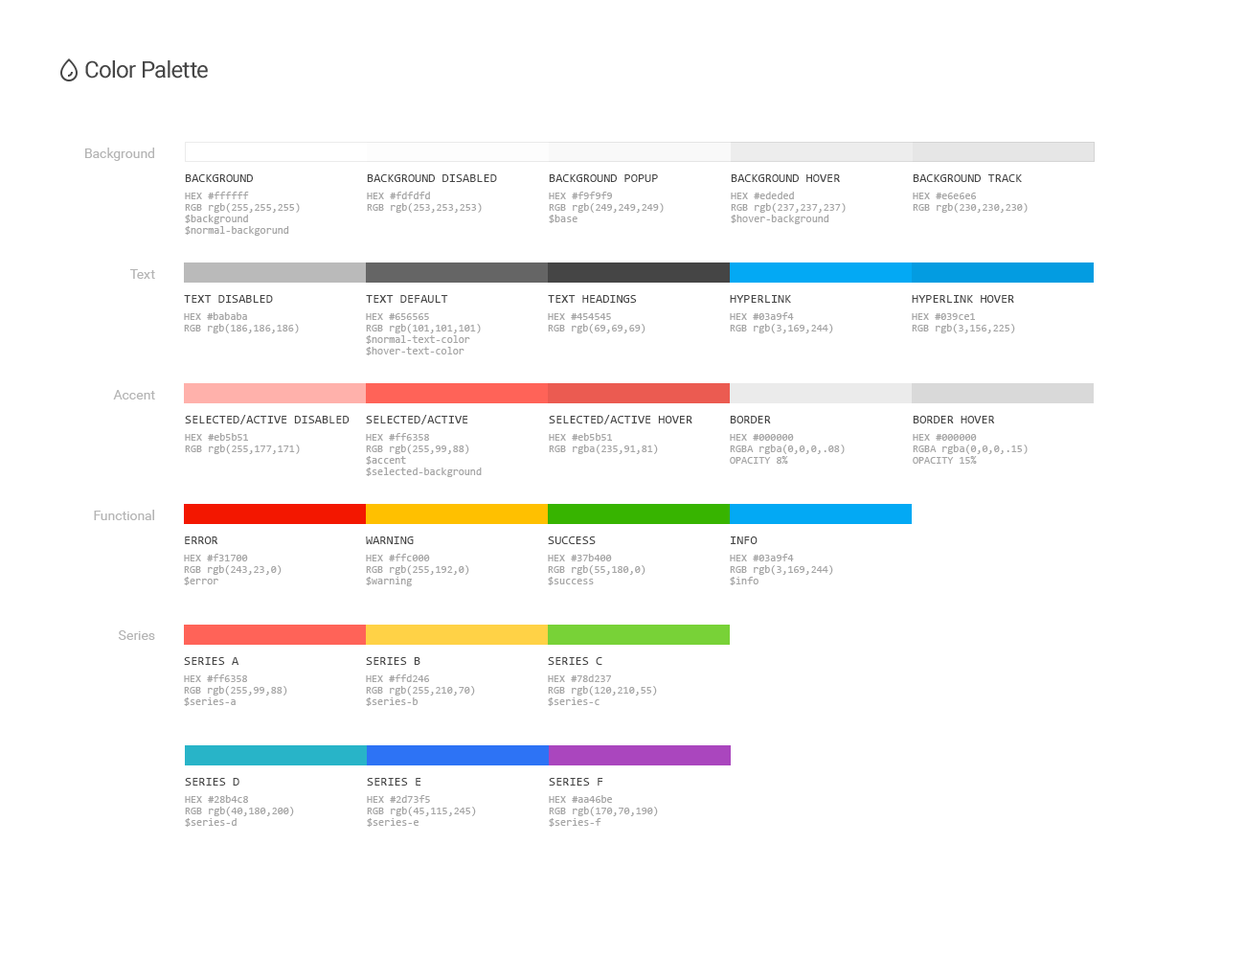
<style>
.page{position:relative;width:1245px;height:958px;background:#ffffff}
.page>*{position:absolute;margin:0}
.t1{font:23px "Roboto-Regular";letter-spacing:-0.025em;color:#454545}
.t2{font:13.4px/120.7px "Roboto-Regular";color:#b4b4b4}
.t3{font:10.5px/11.5px "Consolas";color:#a5a5a5}
.t4{font:12.5px/17.2px "Consolas";color:#454545}
.t5{font:10.5px/17.2px "Consolas";color:#a5a5a5}
.t6{font:13.4px "Roboto-Regular";color:#b4b4b4}
</style>
<div class="page">
<p class="t1" style="left:85px;top:60px;width:123px;height:19px">Color Palette</p>
<p class="t2" style="left:85px;top:147px;width:70px;height:373px;text-align:right">Background<br>Text<br>Accent<br>Functional</p>
<p class="t3" style="left:185px;top:174px;width:115px;height:62px"><span class="t4">BACKGROUND<br></span><span class="t5">HEX #ffffff<br></span>RGB rgb(255,255,255)<br>$background<br>$normal-backgorund</p>
<p class="t3" style="left:367px;top:174px;width:130px;height:39px"><span class="t4">BACKGROUND DISABLED<br></span><span class="t5">HEX #fdfdfd<br></span>RGB rgb(253,253,253)</p>
<p class="t3" style="left:549px;top:174px;width:115px;height:49px"><span class="t4">BACKGROUND POPUP<br></span><span class="t5">HEX #f9f9f9<br></span>RGB rgb(249,249,249)<br>$base</p>
<p class="t3" style="left:731px;top:174px;width:115px;height:50px"><span class="t4">BACKGROUND HOVER<br></span><span class="t5">HEX #ededed<br></span>RGB rgb(237,237,237)<br>$hover-background</p>
<p class="t3" style="left:913px;top:174px;width:115px;height:39px"><span class="t4">BACKGROUND TRACK<br></span><span class="t5">HEX #e6e6e6<br></span>RGB rgb(230,230,230)</p>
<p class="t3" style="left:184px;top:295px;width:115px;height:38px"><span class="t4">TEXT DISABLED<br></span><span class="t5">HEX #bababa<br></span>RGB rgb(186,186,186)</p>
<p class="t3" style="left:366px;top:295px;width:115px;height:60px"><span class="t4">TEXT DEFAULT<br></span><span class="t5">HEX #656565<br></span>RGB rgb(101,101,101)<br>$normal-text-color<br>$hover-text-color</p>
<p class="t3" style="left:548px;top:295px;width:98px;height:38px"><span class="t4">TEXT HEADINGS<br></span><span class="t5">HEX #454545<br></span>RGB rgb(69,69,69)</p>
<p class="t3" style="left:730px;top:295px;width:103px;height:38px"><span class="t4">HYPERLINK<br></span><span class="t5">HEX #03a9f4<br></span>RGB rgb(3,169,244)</p>
<p class="t3" style="left:912px;top:295px;width:103px;height:38px"><span class="t4">HYPERLINK HOVER<br></span><span class="t5">HEX #039ce1<br></span>RGB rgb(3,156,225)</p>
<p class="t4" style="left:185px;top:415px;width:165px;height:39px">SELECTED/ACTIVE DISABLED<br><span class="t5">HEX #eb5b51<br></span><span class="t3">RGB rgb(255,177,171)</span></p>
<p class="t3" style="left:366px;top:415px;width:116px;height:62px"><span class="t4">SELECTED/ACTIVE<br></span><span class="t5">HEX #ff6358<br></span>RGB rgb(255,99,88)<br>$accent<br>$selected-background</p>
<p class="t4" style="left:549px;top:415px;width:143px;height:39px">SELECTED/ACTIVE HOVER<br><span class="t5">HEX #eb5b51<br></span><span class="t3">RGB rgba(235,91,81)</span></p>
<p class="t3" style="left:730px;top:416px;width:115px;height:48px"><span class="t4">BORDER<br></span><span class="t5">HEX #000000<br></span>RGBA rgba(0,0,0,.08)<br>OPACITY 8%</p>
<p class="t3" style="left:913px;top:416px;width:115px;height:48px"><span class="t4">BORDER HOVER<br></span><span class="t5">HEX #000000<br></span>RGBA rgba(0,0,0,.15)<br>OPACITY 15%</p>
<p class="t3" style="left:184px;top:536px;width:98px;height:49px"><span class="t4">ERROR<br></span><span class="t5">HEX #f31700<br></span>RGB rgb(243,23,0)<br>$error</p>
<p class="t3" style="left:366px;top:536px;width:103px;height:50px"><span class="t4">WARNING<br></span><span class="t5">HEX #ffc000<br></span>RGB rgb(255,192,0)<br>$warning</p>
<p class="t3" style="left:548px;top:536px;width:98px;height:49px"><span class="t4">SUCCESS<br></span><span class="t5">HEX #37b400<br></span>RGB rgb(55,180,0)<br>$success</p>
<p class="t3" style="left:730px;top:536px;width:103px;height:49px"><span class="t4">INFO<br></span><span class="t5">HEX #03a9f4<br></span>RGB rgb(3,169,244)<br>$info</p>
<p class="t6" style="left:118px;top:630px;width:37px;height:10px">Series</p>
<p class="t3" style="left:184px;top:657px;width:103px;height:49px"><span class="t4">SERIES A<br></span><span class="t5">HEX #ff6358<br></span>RGB rgb(255,99,88)<br>$series-a</p>
<p class="t3" style="left:366px;top:657px;width:109px;height:49px"><span class="t4">SERIES B<br></span><span class="t5">HEX #ffd246<br></span>RGB rgb(255,210,70)<br>$series-b</p>
<p class="t3" style="left:548px;top:657px;width:109px;height:49px"><span class="t4">SERIES C<br></span><span class="t5">HEX #78d237<br></span>RGB rgb(120,210,55)<br>$series-c</p>
<p class="t3" style="left:185px;top:778px;width:109px;height:49px"><span class="t4">SERIES D<br></span><span class="t5">HEX #28b4c8<br></span>RGB rgb(40,180,200)<br>$series-d</p>
<p class="t3" style="left:367px;top:778px;width:109px;height:49px"><span class="t4">SERIES E<br></span><span class="t5">HEX #2d73f5<br></span>RGB rgb(45,115,245)<br>$series-e</p>
<p class="t3" style="left:549px;top:778px;width:109px;height:49px"><span class="t4">SERIES F<br></span><span class="t5">HEX #aa46be<br></span>RGB rgb(170,70,190)<br>$series-f</p>
</div>
